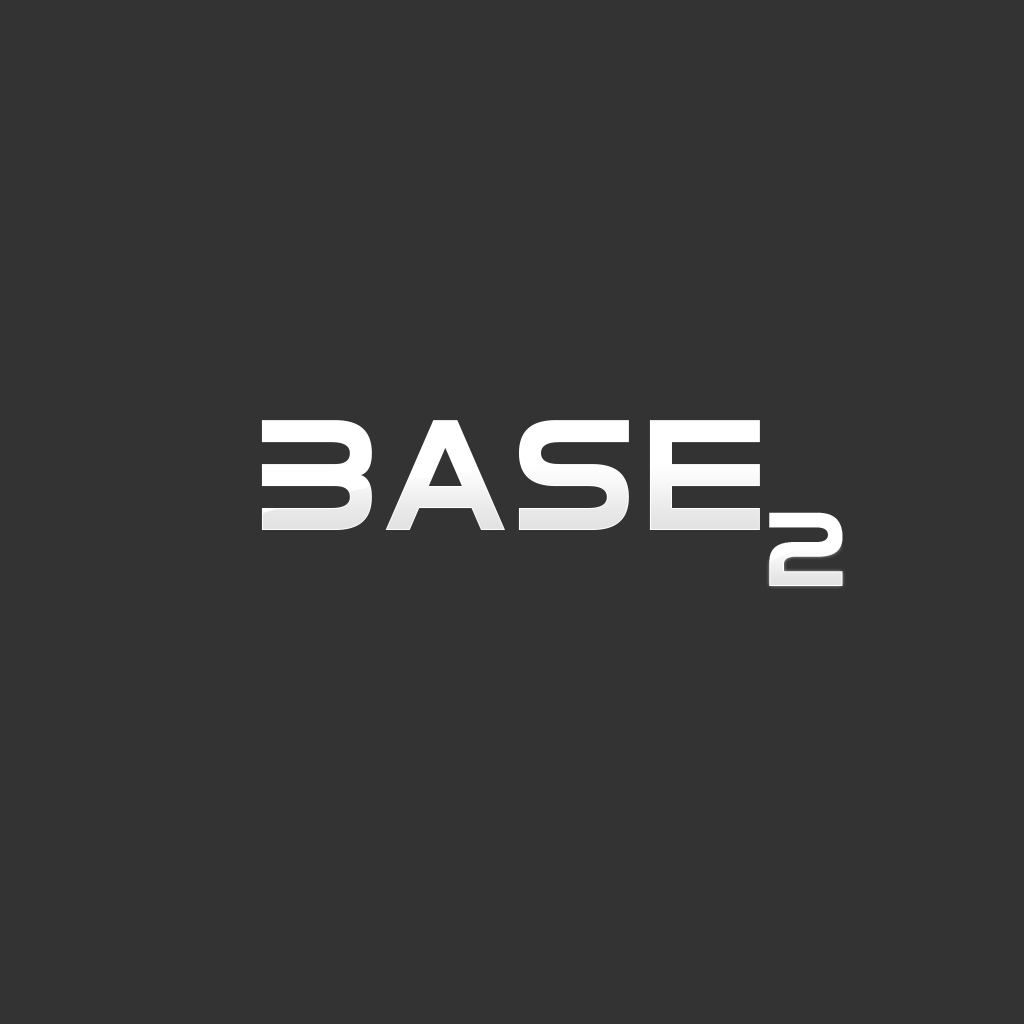
<style>
.page{position:relative;width:1024px;height:1024px;background:#333333}
.page>*{position:absolute;margin:0}
.t1{font:150px "ElementalEnd";color:#ffffff}
.t2{font:100px "ElementalEnd";color:#ffffff}
</style>
<div class="page">
<p class="t1" style="left:261px;top:420px;width:499px;height:110px">Base</p>
<p class="t2" style="left:769px;top:512px;width:74px;height:74px">2</p>
</div>
